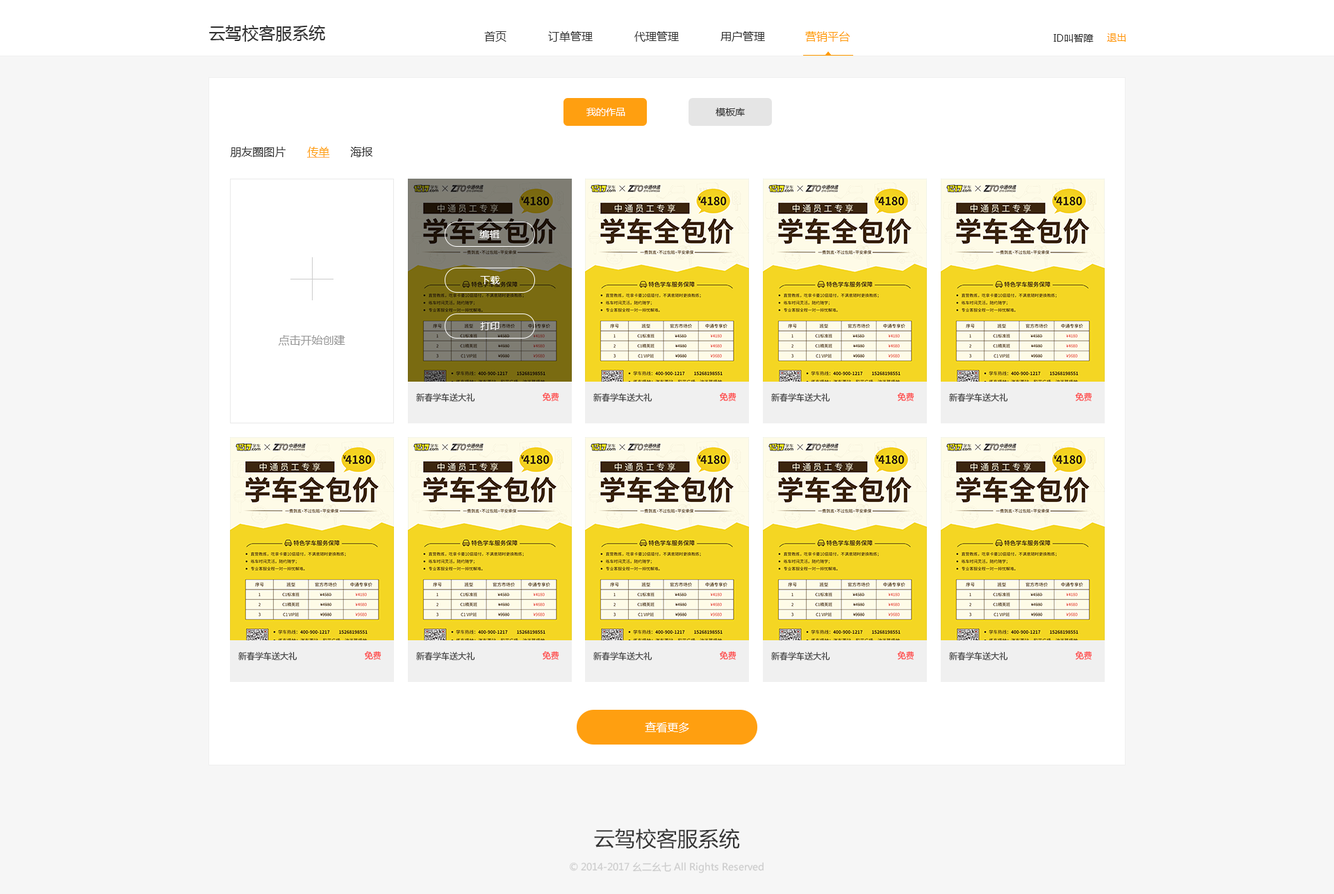
<style>
.page{position:relative;width:1334px;height:894px;background:#f6f6f6}
.page>*{position:absolute;margin:0}
.t1{font:16.7px "MicrosoftYaHei";color:#333333}
.t2{font:11.1px "MicrosoftYaHei";color:#333333}
.t3{font:11.1px "MicrosoftYaHei";color:#ff9900}
.t4{font:9.7px "MicrosoftYaHei";color:#333333}
.t5{font:9.7px "MicrosoftYaHei";color:#ff9900}
.t6{font:9.7px "MicrosoftYaHei";color:#ffffff}
.t7{font:11.1px "MicrosoftYaHei";color:#ff9f10;text-decoration:underline}
.t8{font:11.1px "MicrosoftYaHei";color:#999999}
.t9{font:8.6px "MicrosoftYaHei";color:#333333}
.t10{font:8.6px "MicrosoftYaHei";color:#ff3333}
.t11{font:11.1px "MicrosoftYaHei";color:#ffffff}
.t12{font:20.9px "MicrosoftYaHei";color:#333333}
.t13{font:9.8px "MicrosoftYaHei";color:#cccccc}
</style>
<div class="page">
<p class="t1" style="left:209px;top:25px;width:116px;height:17px">云驾校客服系统</p>
<p class="t2" style="left:484px;top:31px;width:23px;height:11px">首页</p>
<p class="t2" style="left:548px;top:31px;width:45px;height:11px">订单管理</p>
<p class="t2" style="left:634px;top:31px;width:45px;height:11px">代理管理</p>
<p class="t2" style="left:721px;top:31px;width:44px;height:11px">用户管理</p>
<p class="t3" style="left:805px;top:31px;width:45px;height:11px">营销平台</p>
<p class="t4" style="left:1054px;top:34px;width:40px;height:8px">ID叫智障</p>
<p class="t5" style="left:1107px;top:33px;width:19px;height:9px">退出</p>
<p class="t6" style="left:587px;top:108px;width:38px;height:8px">我的作品</p>
<p class="t4" style="left:716px;top:108px;width:29px;height:8px">模板库</p>
<p class="t2" style="left:230px;top:147px;width:56px;height:10px">朋友圈图片</p>
<p class="t7" style="left:307px;top:147px;width:23px;height:11px">传单</p>
<p class="t2" style="left:350px;top:147px;width:22px;height:10px">海报</p>
<p class="t6" style="left:480px;top:230px;width:20px;height:8px">编辑</p>
<p class="t6" style="left:480px;top:276px;width:20px;height:8px">下载</p>
<p class="t6" style="left:480px;top:322px;width:20px;height:8px">打印</p>
<p class="t8" style="left:279px;top:335px;width:66px;height:10px">点击开始创建</p>
<p class="t9" style="left:416px;top:393px;width:59px;height:9px">新春学车送大礼</p>
<p class="t10" style="left:542px;top:392px;width:17px;height:9px">免费</p>
<p class="t9" style="left:593px;top:393px;width:60px;height:9px">新春学车送大礼</p>
<p class="t10" style="left:719px;top:392px;width:18px;height:9px">免费</p>
<p class="t9" style="left:771px;top:393px;width:59px;height:9px">新春学车送大礼</p>
<p class="t10" style="left:897px;top:392px;width:18px;height:9px">免费</p>
<p class="t9" style="left:949px;top:393px;width:59px;height:9px">新春学车送大礼</p>
<p class="t10" style="left:1075px;top:392px;width:17px;height:9px">免费</p>
<p class="t9" style="left:238px;top:651px;width:59px;height:9px">新春学车送大礼</p>
<p class="t10" style="left:364px;top:650px;width:18px;height:9px">免费</p>
<p class="t9" style="left:416px;top:651px;width:59px;height:9px">新春学车送大礼</p>
<p class="t10" style="left:542px;top:650px;width:17px;height:9px">免费</p>
<p class="t9" style="left:593px;top:651px;width:60px;height:9px">新春学车送大礼</p>
<p class="t10" style="left:719px;top:650px;width:18px;height:9px">免费</p>
<p class="t9" style="left:771px;top:651px;width:59px;height:9px">新春学车送大礼</p>
<p class="t10" style="left:897px;top:650px;width:18px;height:9px">免费</p>
<p class="t9" style="left:949px;top:651px;width:59px;height:9px">新春学车送大礼</p>
<p class="t10" style="left:1075px;top:650px;width:17px;height:9px">免费</p>
<p class="t11" style="left:645px;top:721px;width:44px;height:11px">查看更多</p>
<p class="t12" style="left:594px;top:828px;width:146px;height:21px">云驾校客服系统</p>
<p class="t13" style="left:570px;top:862px;width:194px;height:11px">© 2014-2017 幺二幺七 All Rights Reserved</p>
</div>
